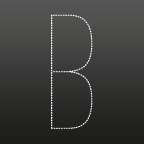
<style>
.page{position:relative;width:144px;height:144px}
.page>*{position:absolute;margin:0}
.t1{font:175.9px "OstrichSansDashed-Medium";color:#ffffff}
</style>
<div class="page">
<p class="t1" style="left:51px;top:14px;width:42px;height:115px">B</p>
</div>
